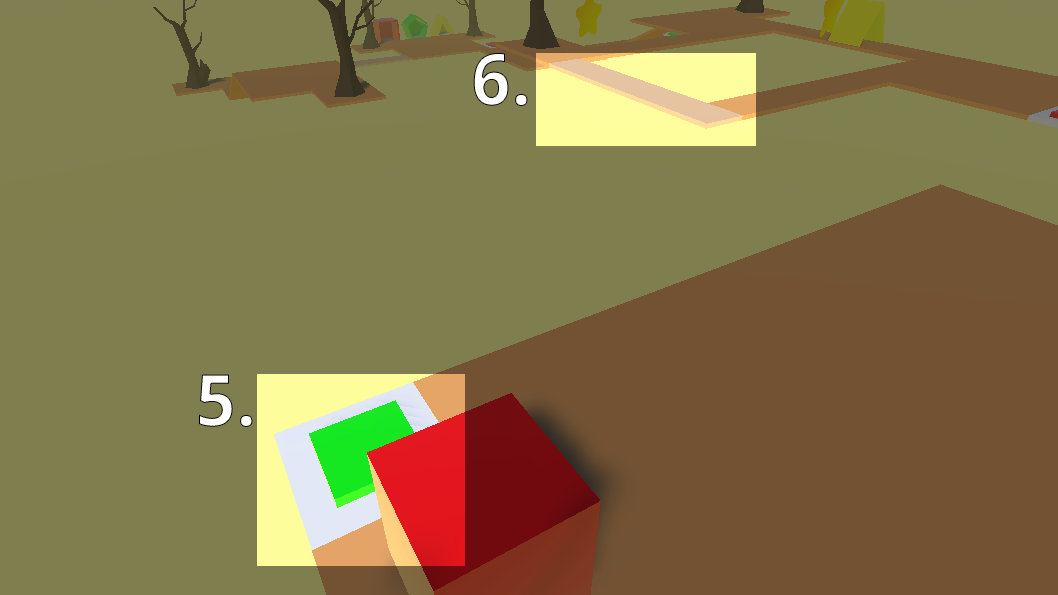
<style>
.page{position:relative;width:1058px;height:595px;background:#7f7e4e}
.page>*{position:absolute;margin:0}
.t1{font:72px "NotoSans-Bold";letter-spacing:0.01em;color:#ffffff}
</style>
<div class="page">
<p class="t1" style="left:473px;top:53px;width:55px;height:53px">6.</p>
<p class="t1" style="left:199px;top:374px;width:54px;height:53px">5.</p>
</div>
